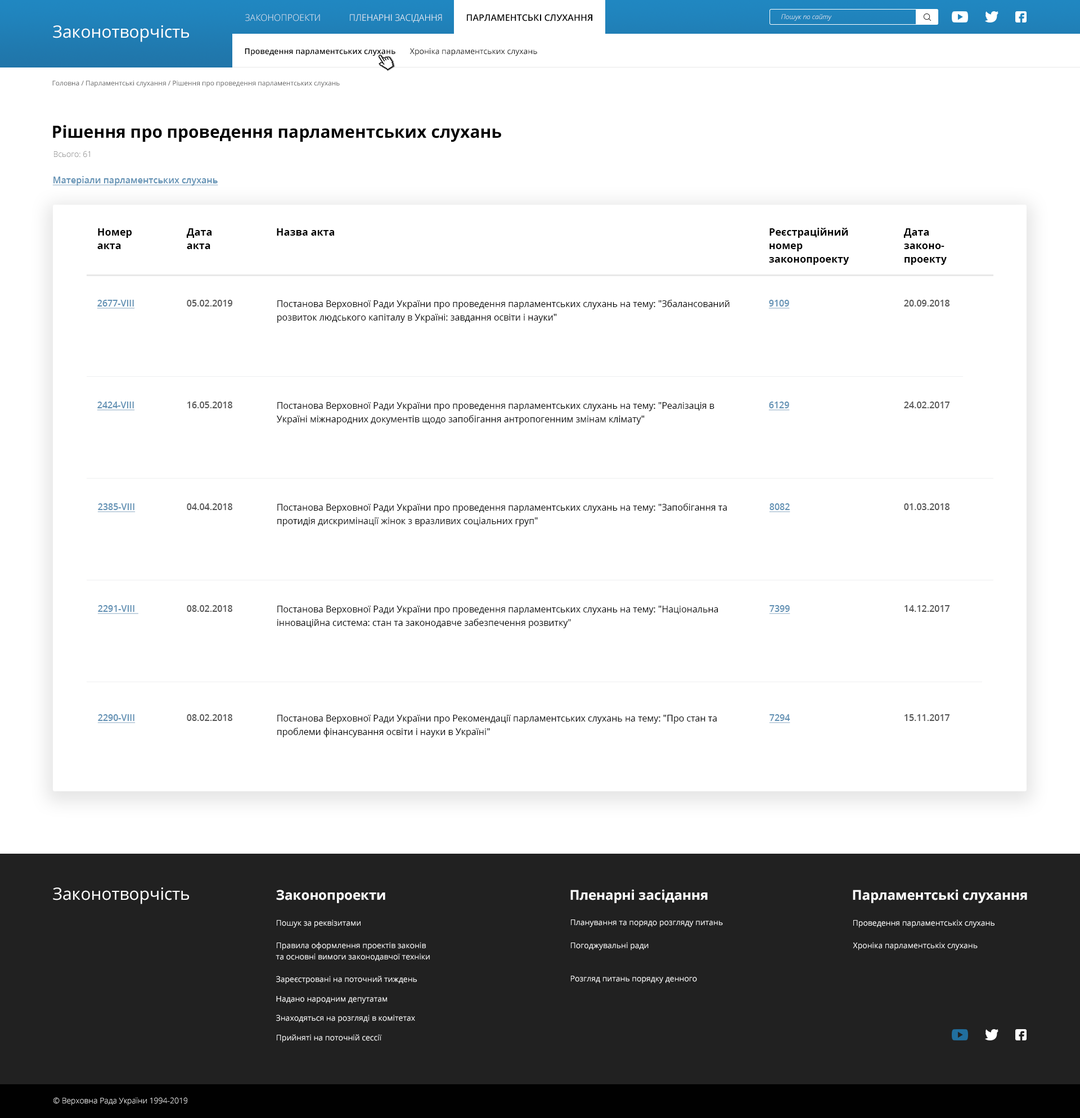
<style>
.page{position:relative;width:1080px;height:1118px;background:#ffffff}
.page>*{position:absolute;margin:0}
.t1{font:9px "OpenSans-Light";color:#dee9f2;text-transform:uppercase}
.t2{font:9px "OpenSans-Light";color:#ffffff;text-transform:uppercase}
.t3{font:9px "OpenSans-SemiBold";color:#000000;text-transform:uppercase}
.t4{font:6.8px "OpenSans-LightItalic";color:#ffffff}
.t5{font:16.9px "OpenSans-Regular";color:#ffffff}
.t6{font:7.9px "OpenSans-SemiBold";color:#000000}
.t7{font:7.9px "OpenSans-Regular";color:#000000}
.t8{font:6.8px "OpenSans-Regular";color:#585858}
.t9{font:16.9px "OpenSans-Bold";color:#000000}
.t10{font:7.9px "OpenSans-Light"}
.t11{font:9px "OpenSans-SemiBold";color:#6291b4;text-decoration:underline}
.t12{font:10.1px/13.5px "OpenSans-Bold";color:#000000}
.t13{font:10.1px "OpenSans-Bold";color:#000000}
.t14{font:9px "OpenSans-SemiBold";color:#585858}
.t15{font:9px/13.5px "OpenSans-Regular";color:#000000}
.t16{font:13.5px "OpenSans-Bold";color:#ffffff}
.t17{font:7.9px "OpenSans-Regular";color:#ffffff}
.t18{font:7.9px/11.3px "OpenSans-Regular";color:#ffffff}
.t19{font:7.9px/14.6px "OpenSans-Regular";color:#ffffff}
.t20{font:7.9px "OpenSans-Light";color:#ffffff}
</style>
<div class="page">
<p class="t1" style="left:245px;top:14px;width:75px;height:7px">Законопроекти</p>
<p class="t2" style="left:350px;top:14px;width:92px;height:9px">пленарні засідання</p>
<p class="t3" style="left:467px;top:14px;width:125px;height:7px">парламентські слухання</p>
<p class="t4" style="left:781px;top:14px;width:51px;height:7px">Пошук по сайту</p>
<p class="t5" style="left:53px;top:25px;width:136px;height:17px">Законотворчість</p>
<p class="t6" style="left:245px;top:48px;width:292px;height:8px">Проведення парламентських слухань<span class="t7">       Хроніка парламентських слухань</span></p>
<p class="t8" style="left:52px;top:80px;width:288px;height:7px">Головна / Парламентські слухання / Рішення про проведення парламентських слухань</p>
<p class="t9" style="left:53px;top:125px;width:448px;height:17px">Рішення про проведення парламентських слухань</p>
<p class="t10" style="left:54px;top:151px;width:36px;height:7px">Всього: 61</p>
<p class="t11" style="left:52px;top:176px;width:166px;height:10px">Матеріали парламентських слухань</p>
<p class="t12" style="left:97px;top:228px;width:35px;height:21px">Номер <br>акта</p>
<p class="t12" style="left:186px;top:228px;width:26px;height:21px">Дата <br>акта</p>
<p class="t13" style="left:277px;top:228px;width:57px;height:8px">Назва акта</p>
<p class="t12" style="left:769px;top:228px;width:80px;height:37px">Реєстраційний<br>номер<br>законопроекту</p>
<p class="t12" style="left:903px;top:228px;width:44px;height:37px">Дата<br>законо-<br>проекту</p>
<p class="t11" style="left:97px;top:300px;width:38px;height:9px">2677-VIII</p>
<p class="t14" style="left:187px;top:300px;width:45px;height:7px">05.02.2019</p>
<p class="t15" style="left:277px;top:300px;width:453px;height:23px">Постанова Верховної Ради України про проведення парламентських слухань на тему: "Збалансований розвиток людського капіталу в Україні: завдання освіти і науки"</p>
<p class="t11" style="left:768px;top:300px;width:22px;height:9px">9109</p>
<p class="t14" style="left:904px;top:300px;width:46px;height:7px">20.09.2018</p>
<p class="t11" style="left:97px;top:402px;width:38px;height:9px">2424-VIII</p>
<p class="t14" style="left:187px;top:402px;width:45px;height:6px">16.05.2018</p>
<p class="t11" style="left:768px;top:402px;width:22px;height:9px">6129</p>
<p class="t14" style="left:904px;top:402px;width:46px;height:6px">24.02.2017</p>
<p class="t15" style="left:277px;top:402px;width:437px;height:23px">Постанова Верховної Ради України про проведення парламентських слухань на тему: "Реалізація в Україні міжнародних документів щодо запобігання антропогенним змінам клімату"</p>
<p class="t11" style="left:97px;top:503px;width:39px;height:9px">2385-VIII</p>
<p class="t14" style="left:187px;top:503px;width:45px;height:7px">04.04.2018</p>
<p class="t15" style="left:277px;top:503px;width:450px;height:24px">Постанова Верховної Ради України про проведення парламентських слухань на тему: "Запобігання та протидія дискримінації жінок з вразливих соціальних груп"</p>
<p class="t11" style="left:769px;top:503px;width:21px;height:9px">8082</p>
<p class="t14" style="left:904px;top:503px;width:46px;height:7px">01.03.2018</p>
<p class="t11" style="left:97px;top:605px;width:41px;height:9px">2291-VIII</p>
<p class="t14" style="left:187px;top:605px;width:45px;height:7px">08.02.2018</p>
<p class="t15" style="left:277px;top:606px;width:441px;height:22px">Постанова Верховної Ради України про проведення парламентських слухань на тему: "Національна інноваційна система: стан та законодавче забезпечення розвитку"</p>
<p class="t11" style="left:769px;top:605px;width:21px;height:9px">7399</p>
<p class="t14" style="left:905px;top:605px;width:45px;height:7px">14.12.2017</p>
<p class="t11" style="left:97px;top:714px;width:39px;height:9px">2290-VIII</p>
<p class="t14" style="left:187px;top:714px;width:45px;height:7px">08.02.2018</p>
<p class="t15" style="left:277px;top:715px;width:440px;height:22px">Постанова Верховної Ради України про Рекомендації парламентських слухань на тему: "Про стан та проблеми фінансування освіти і науки в Україні"</p>
<p class="t11" style="left:769px;top:714px;width:21px;height:9px">7294</p>
<p class="t14" style="left:905px;top:714px;width:45px;height:7px">15.11.2017</p>
<p class="t5" style="left:53px;top:888px;width:136px;height:17px">Законотворчість</p>
<p class="t16" style="left:276px;top:890px;width:109px;height:13px">Законопроекти</p>
<p class="t16" style="left:570px;top:889px;width:138px;height:14px">Пленарні засідання</p>
<p class="t16" style="left:853px;top:889px;width:174px;height:14px">Парламентські слухання</p>
<p class="t17" style="left:277px;top:920px;width:84px;height:8px">Пошук за реквізитами</p>
<p class="t17" style="left:571px;top:920px;width:152px;height:8px">Планування та порядо розгляду питань</p>
<p class="t17" style="left:853px;top:920px;width:142px;height:8px">Проведення парламентськіх слухань</p>
<p class="t18" style="left:276px;top:942px;width:154px;height:19px"><span class="t19">Правила оформлення проектів законів<br></span>та основні вимоги законодавчої техніки</p>
<p class="t17" style="left:571px;top:942px;width:78px;height:9px">Погоджувальні ради</p>
<p class="t17" style="left:853px;top:942px;width:125px;height:9px">Хроніка парламентськіх слухань</p>
<p class="t17" style="left:276px;top:976px;width:141px;height:8px">Зареєстровані на поточний тиждень</p>
<p class="t17" style="left:571px;top:976px;width:126px;height:8px">Розгляд питань порядку денного</p>
<p class="t17" style="left:276px;top:996px;width:111px;height:8px">Надано народним депутатам</p>
<p class="t17" style="left:276px;top:1015px;width:139px;height:8px">Знаходяться на розгляді в комітетах</p>
<p class="t17" style="left:277px;top:1034px;width:105px;height:9px">Прийняті на поточній сессії</p>
<p class="t20" style="left:53px;top:1097px;width:134px;height:9px">© Верховна Рада України 1994-2019</p>
</div>
